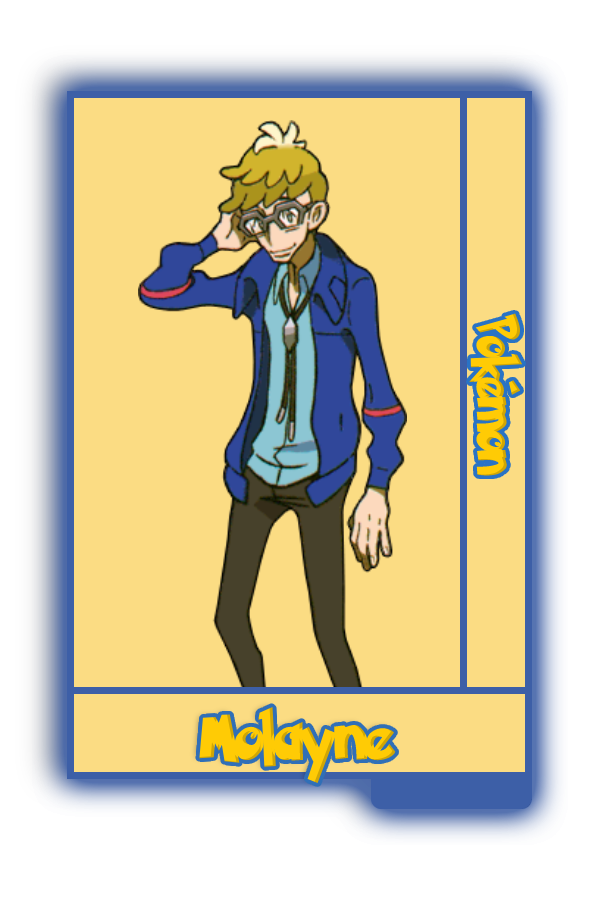
<style>
.page{position:relative;width:600px;height:900px;background:#fbdc83}
.page>*{position:absolute;margin:0}
.t1{font:48.8px "PokemonSolidNormal";color:#ffcb05;scale:0.8 1}
.t2{font:56.6px "PokemonSolidNormal";color:#ffcb05;scale:0.92 1}
</style>
<div class="page">
<p class="t1" style="left:469px;top:313px;width:54px;height:163px;rotate:90deg">Pokémon</p>
<p class="t2" style="left:199px;top:706px;width:197px;height:77px">Molayne</p>
</div>
